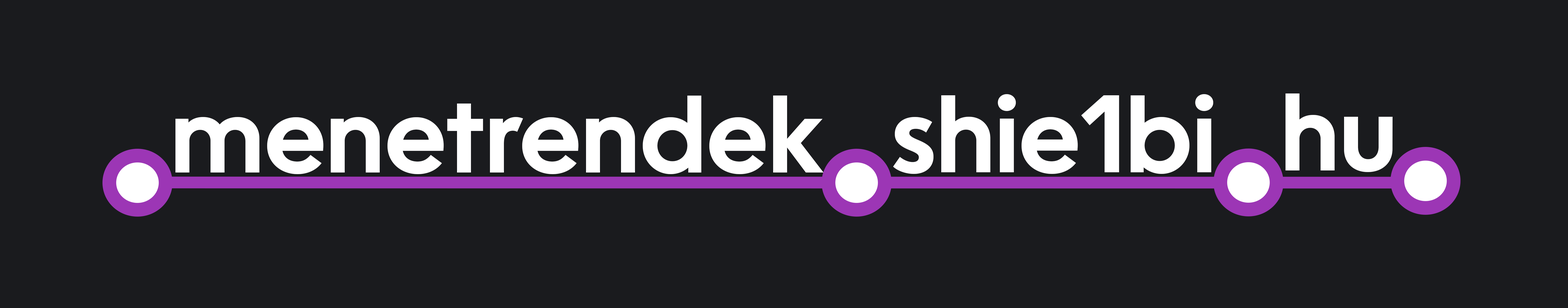
<style>
.page{position:relative;width:1568px;height:308px;background:#1a1b1e}
.page>*{position:absolute;margin:0}
.t1{font:105.5px "Oceanwide-Semibold";color:#ffffff}
</style>
<div class="page">
<p class="t1" style="left:175px;top:96px;width:649px;height:79px">menetrendek</p>
<p class="t1" style="left:893px;top:94px;width:320px;height:80px">shie1bi</p>
<p class="t1" style="left:1286px;top:94px;width:107px;height:78px">hu</p>
</div>
